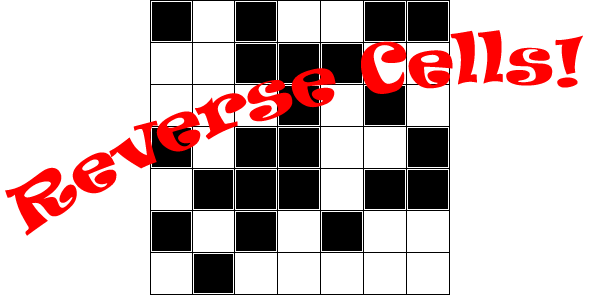
<style>
.page{position:relative;width:600px;height:295px;background:#ffffff}
.page>*{position:absolute;margin:0}
.t1{font:60px "Ravie";color:#ff0000}
</style>
<div class="page">
<p class="t1" style="left:5px;top:30px;width:578px;height:206px;rotate:-15deg">Reverse Cells!</p>
</div>
